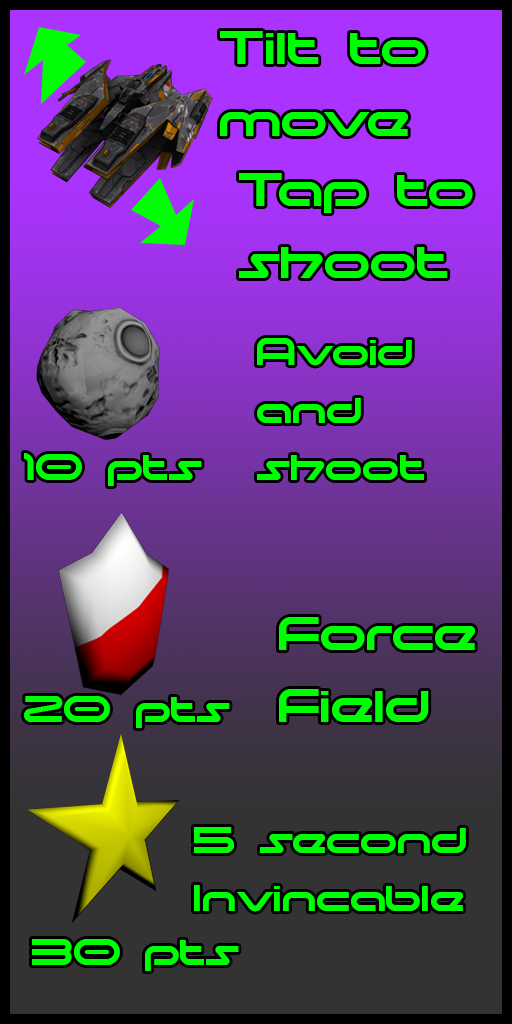
<style>
.page{position:relative;width:512px;height:1024px}
.page>*{position:absolute;margin:0}
.t1{font:60px "moonhouse";color:#00ff06}
.t2{font:48px "moonhouse";color:#00ff06}
</style>
<div class="page">
<p class="t1" style="left:220px;top:31px;width:206px;height:105px">Tilt to<br>move</p>
<p class="t1" style="left:239px;top:173px;width:234px;height:105px">Tap to<br>shoot</p>
<p class="t2" style="left:257px;top:338px;width:167px;height:142px">Avoid<br>and <br>shoot</p>
<p class="t2" style="left:24px;top:453px;width:178px;height:33px">10 pts</p>
<p class="t1" style="left:279px;top:617px;width:196px;height:105px">Force<br>Field</p>
<p class="t2" style="left:24px;top:696px;width:206px;height:32px">20 pts</p>
<p class="t2" style="left:194px;top:827px;width:272px;height:85px">5 second<br>Invincable</p>
<p class="t2" style="left:32px;top:939px;width:207px;height:32px">30 pts</p>
</div>
